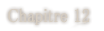
<style>
.page{position:relative;width:104px;height:31px;background:#ffffff}
.page>*{position:absolute;margin:0}
.t1{font:19px "MS-PMincho";color:#d6cdc1;font-weight:bold;scale:0.84 1}
</style>
<div class="page">
<p class="t1" style="left:8px;top:8px;width:82px;height:17px">Chapitre 12</p>
</div>
